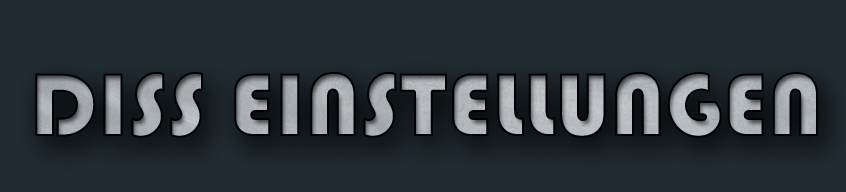
<style>
.page{position:relative;width:846px;height:192px;background:#202b32}
.page>*{position:absolute;margin:0}
.t1{font:93.6px "Bauhaus93";text-transform:uppercase}
</style>
<div class="page">
<p class="t1" style="left:35px;top:72px;width:783px;height:66px">Diss Einstellungen</p>
</div>
